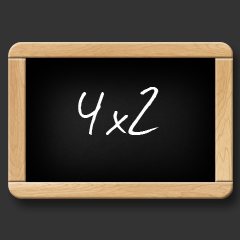
<style>
.page{position:relative;width:240px;height:240px;background:#333333}
.page>*{position:absolute;margin:0}
.t1{font:74.5px "Journal";letter-spacing:0.025em;color:#fdfdfd}
</style>
<div class="page">
<p class="t1" style="left:78px;top:87px;width:81px;height:48px">4x2</p>
</div>
